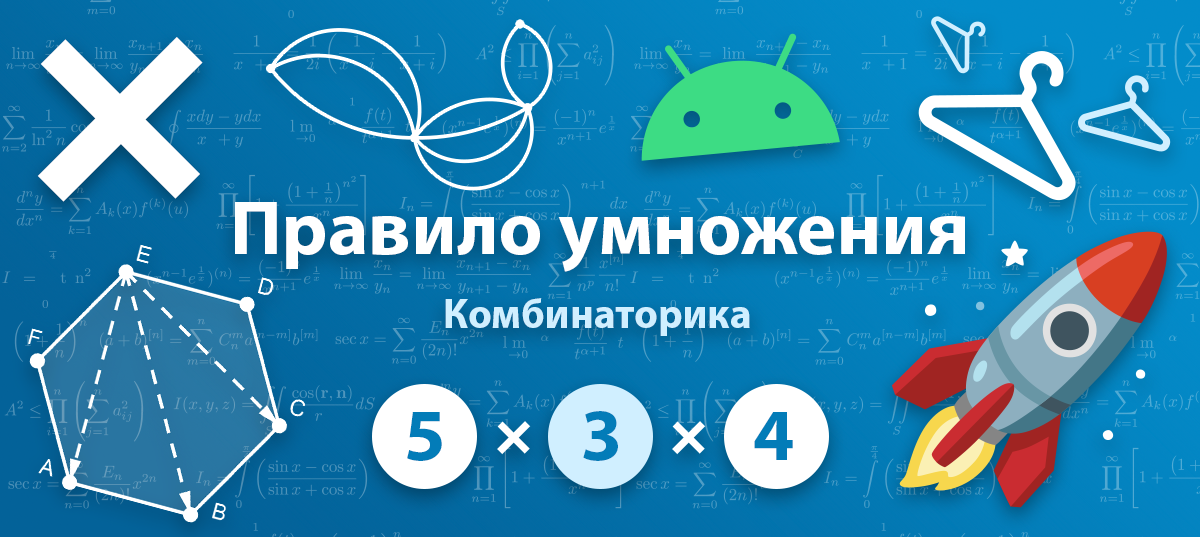
<style>
.page{position:relative;width:1200px;height:537px}
.page>*{position:absolute;margin:0}
.t1{font:369.2px "MyriadPro-Bold";color:#ffffff}
.t2{font:76.9px "MyriadPro-Bold";color:#ffffff}
.t3{font:41.6px "MyriadPro-Bold";color:#d0efff}
.t4{font:73.9px "MyriadPro-Bold";color:#037cb8}
.t5{font:74.4px "MyriadPro-Bold";color:#ffffff}
</style>
<div class="page">
<p class="t1" style="left:37px;top:37px;width:166px;height:165px;rotate:45deg">+</p>
<p class="t2" style="left:235px;top:202px;width:730px;height:70px">Правило умножения</p>
<p class="t3" style="left:445px;top:298px;width:305px;height:38px">Комбинаторика</p>
<p class="t4" style="left:407px;top:412px;width:35px;height:49px">5</p>
<p class="t4" style="left:583px;top:411px;width:35px;height:50px">3</p>
<p class="t4" style="left:754px;top:412px;width:39px;height:48px">4</p>
<p class="t5" style="left:497px;top:421px;width:34px;height:34px;rotate:45deg">+</p>
<p class="t5" style="left:672px;top:421px;width:34px;height:34px;rotate:45deg">+</p>
</div>
